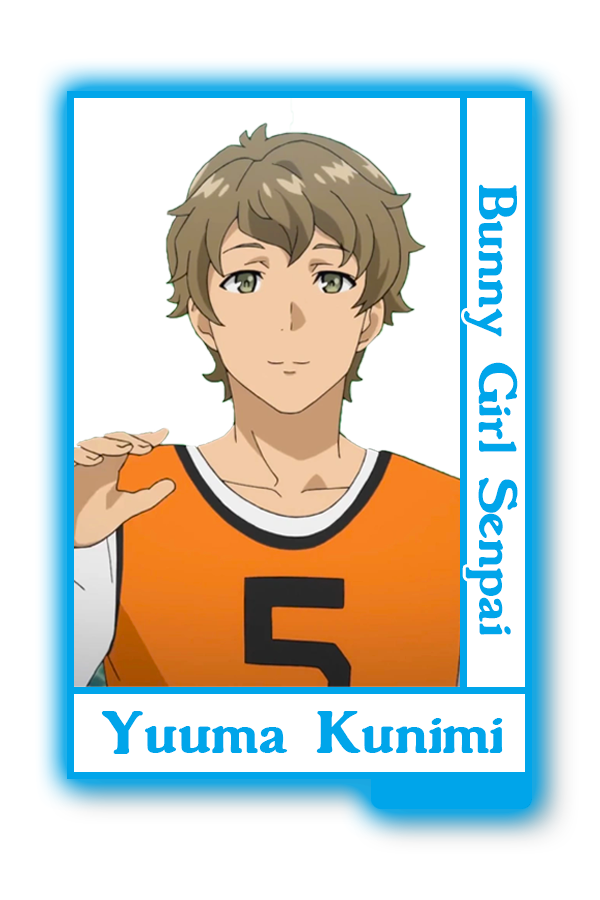
<style>
.page{position:relative;width:600px;height:900px;background:#ffffff}
.page>*{position:absolute;margin:0}
.t1{font:48.8px "Grantham-Bold";color:#0ba3e1}
.t2{font:55.4px "Grantham-Bold";color:#0ba3e1}
</style>
<div class="page">
<p class="t1" style="left:464px;top:184px;width:54px;height:451px;rotate:90deg">Bunny Girl Senpai</p>
<p class="t2" style="left:101px;top:711px;width:402px;height:43px">Yuuma Kunimi</p>
</div>
